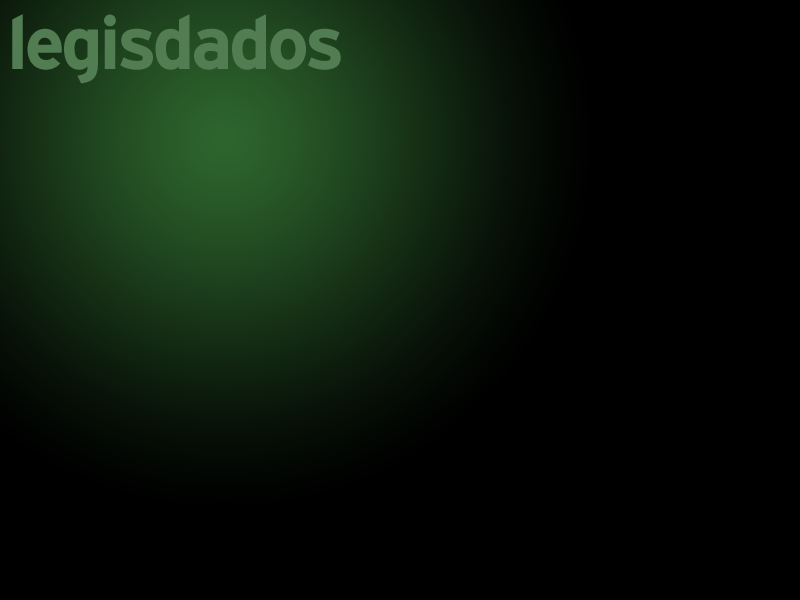
<style>
.page{position:relative;width:800px;height:600px;background:#000000}
.page>*{position:absolute;margin:0}
.t1{font:75px "Interstate-Bold";letter-spacing:-0.05em;color:#537c53}
</style>
<div class="page">
<p class="t1" style="left:12px;top:14px;width:329px;height:70px">legisdados</p>
</div>
